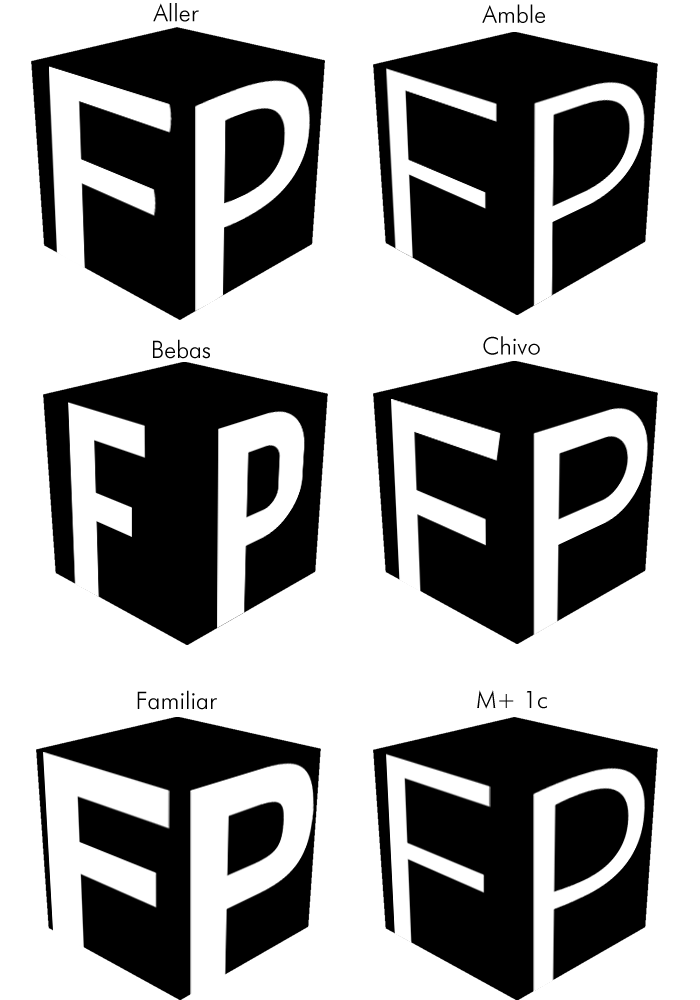
<style>
.page{position:relative;width:700px;height:1000px;background:#ffffff}
.page>*{position:absolute;margin:0}
.t1{font:24px "FuturaBT-Light";color:#000000}
</style>
<div class="page">
<p class="t1" style="left:153px;top:3px;width:46px;height:19px">Aller</p>
<p class="t1" style="left:482px;top:4px;width:63px;height:19px">Amble</p>
<p class="t1" style="left:153px;top:339px;width:57px;height:20px">Bebas</p>
<p class="t1" style="left:483px;top:336px;width:57px;height:19px">Chivo</p>
<p class="t1" style="left:137px;top:690px;width:80px;height:20px">Familiar</p>
<p class="t1" style="left:477px;top:690px;width:70px;height:19px">M+ 1c</p>
</div>
